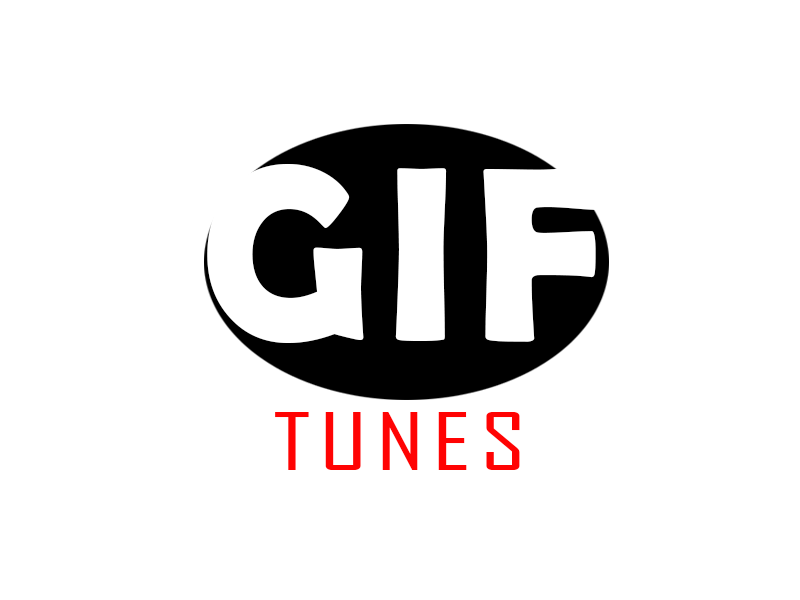
<style>
.page{position:relative;width:800px;height:600px;background:#ffffff}
.page>*{position:absolute;margin:0}
.t1{font:251.2px "BerlinSansFBDemi-Bold";letter-spacing:0.075em;color:#ffffff;scale:0.94 1}
.t2{font:75.8px "AgencyFB-Reg";letter-spacing:0.075em;color:#ff0303;scale:1.45 1}
</style>
<div class="page">
<p class="t1" style="left:207px;top:163px;width:397px;height:180px">GIF</p>
<p class="t2" style="left:275px;top:412px;width:245px;height:58px">TUNES</p>
</div>
